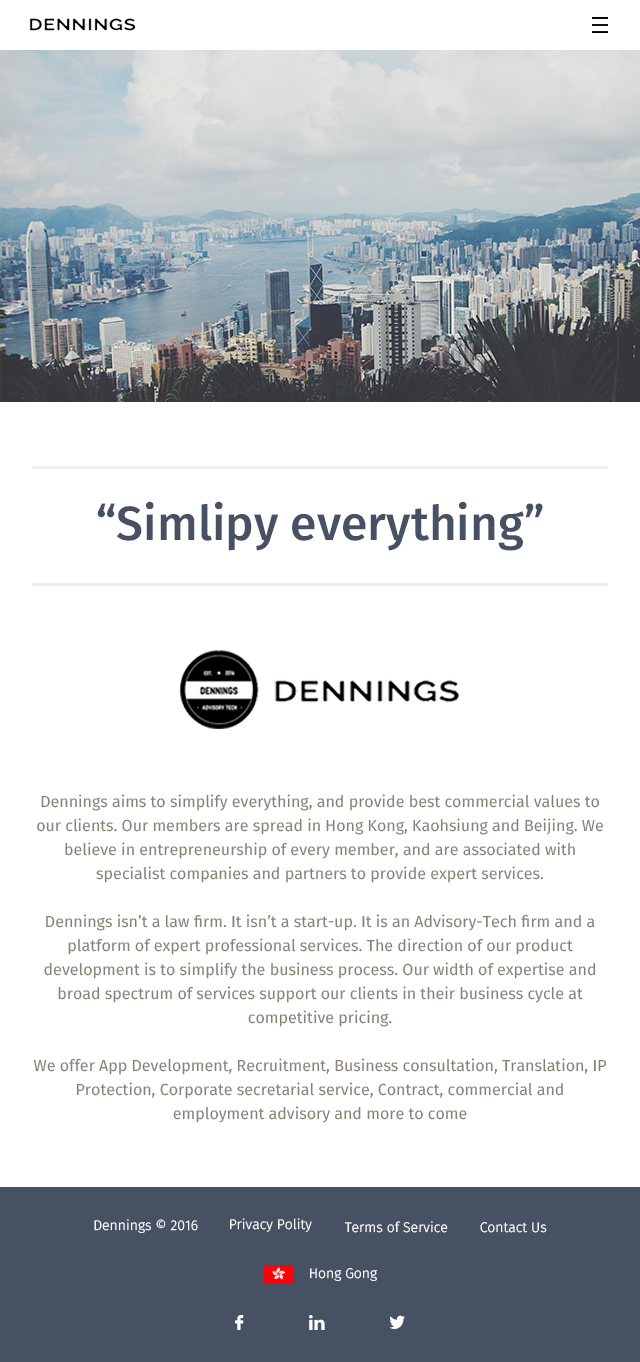
<style>
.page{position:relative;width:640px;height:1362px;background:#ffffff}
.page>*{position:absolute;margin:0}
.t1{font:48px "FiraSans-Medium";color:#465163}
.t2{font:16px/24px "FiraSans-Regular";color:#898176}
.t3{font:14px "FiraSans-Light";color:#ffffff}
</style>
<div class="page">
<p class="t1" style="left:97px;top:501px;width:446px;height:50px">“Simlipy everything”</p>
<p class="t2" style="left:33px;top:794px;width:574px;height:329px;text-align:center">Dennings aims to simplify everything, and provide best commercial values to our clients. Our members are spread in Hong Kong, Kaohsiung and Beijing. We believe in entrepreneurship of every member, and are associated with specialist companies and partners to provide expert services. <br><br>Dennings isn’t a law firm. It isn’t a start-up. It is an Advisory-Tech firm and a platform of expert professional services. The direction of our product development is to simplify the business process. Our width of expertise and broad spectrum of services support our clients in their business cycle at competitive pricing.   <br><br>We offer App Development, Recruitment, Business consultation, Translation, IP Protection, Corporate secretarial service, Contract, commercial and employment advisory and more to come</p>
<p class="t3" style="left:94px;top:1219px;width:104px;height:14px">Dennings © 2016</p>
<p class="t3" style="left:230px;top:1218px;width:82px;height:14px">Privacy Polity</p>
<p class="t3" style="left:344px;top:1221px;width:104px;height:12px">Terms of Service</p>
<p class="t3" style="left:480px;top:1222px;width:67px;height:11px">Contact Us</p>
<p class="t3" style="left:310px;top:1268px;width:67px;height:13px">Hong Gong</p>
</div>
